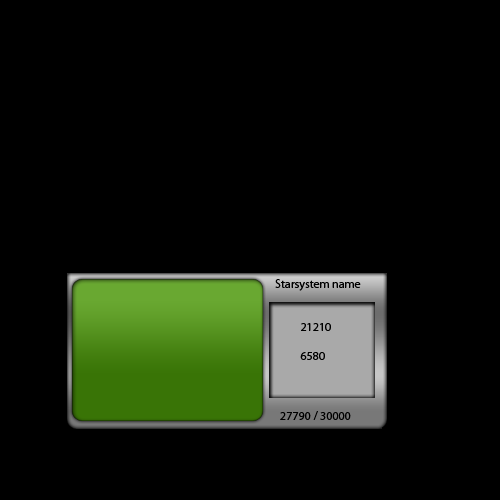
<style>
.page{position:relative;width:500px;height:500px;background:#000000}
.page>*{position:absolute;margin:0}
.t1{font:12px "MyriadPro-Regular";color:#000000}
</style>
<div class="page">
<p class="t1" style="left:275px;top:279px;width:86px;height:141px">Starsystem name<br><br><br>          21210<br><br>          6580<br><br><br><br>  27790 / 30000</p>
</div>
